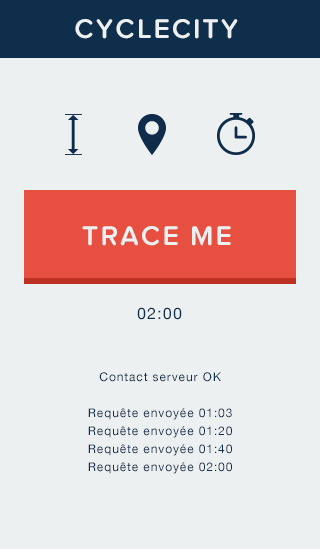
<style>
.page{position:relative;width:320px;height:549px;background:#ecf0f1}
.page>*{position:absolute;margin:0}
.t1{font:28px "ProximaNovaSoft-Semibold";letter-spacing:0.075em;color:#ecf0f1;text-transform:uppercase}
.t2{font:16px "HelveticaNeue";letter-spacing:0.075em;color:#0f2e4c;text-transform:uppercase}
.t3{font:12px/18px "HelveticaNeue";letter-spacing:0.075em;color:#0f2e4c}
</style>
<div class="page">
<p class="t1" style="left:75px;top:19px;width:163px;height:20px">CYCLECITY</p>
<p class="t1" style="left:82px;top:226px;width:149px;height:20px">Trace me</p>
<p class="t2" style="left:137px;top:307px;width:45px;height:13px">02:00</p>
<p class="t3" style="left:88px;top:372px;width:144px;height:102px;text-align:center">Contact serveur OK<br><br>Requête envoyée 01:03<br>Requête envoyée 01:20<br>Requête envoyée 01:40<br>Requête envoyée 02:00</p>
</div>
